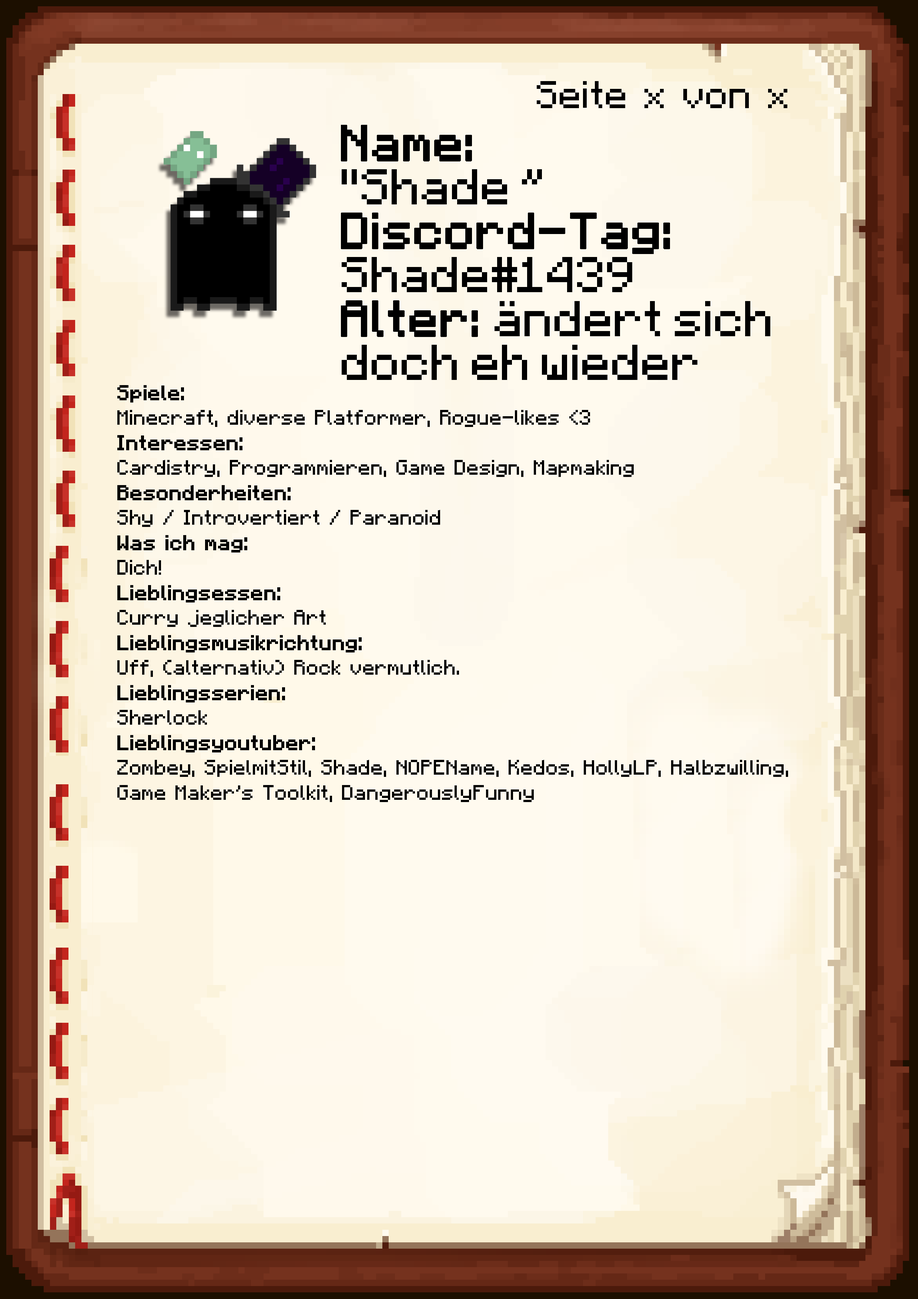
<style>
.page{position:relative;width:918px;height:1299px}
.page>*{position:absolute;margin:0}
.t1{font:38.6px "Minecraft-Regular";color:#000000}
.t2{font:40.1px/43.9px "Minecraft";color:#000000}
.t3{font:40.1px/43.9px "Minecraft";color:#000000;font-weight:bold}
.t4{font:20.8px "Minecraft-Regular";color:#000000}
.t5{font:20.8px "Minecraft-Regular";color:#000000;font-weight:bold}
</style>
<div class="page">
<p class="t1" style="left:537px;top:81px;width:250px;height:27px">Seite x von x</p>
<p class="t2" style="left:341px;top:125px;width:429px;height:255px"><span class="t3">Name:<br></span>"Shade ”<br><span class="t3">Discord-Tag:<br></span>Shade#1439<br><span class="t3">Alter: </span>ändert sich<br>doch eh wieder</p>
<p class="t4" style="left:117px;top:385px;width:671px;height:417px"><span class="t5">Spiele: <br></span>Minecraft, diverse Platformer, Rogue-likes &lt;3<br><span class="t5">Interessen:<br></span>Cardistry, Programmieren, Game Design, Mapmaking <br><span class="t5">Besonderheiten:<br></span>Shy / Introvertiert / Paranoid<br><span class="t5">Was ich mag:<br></span>Dich! <br><span class="t5">Lieblingsessen:<br></span>Curry jeglicher Art <br><span class="t5">Lieblingsmusikrichtung:<br></span>Uff, (alternativ) Rock vermutlich.<br><span class="t5">Lieblingsserien:<br></span>Sherlock<br><span class="t5">Lieblingsyoutuber:<br></span>Zombey, SpielmitStil, Shade, NOPEName, Kedos, HollyLP, Halbzwilling, Game Maker's Toolkit, DangerouslyFunny</p>
</div>
